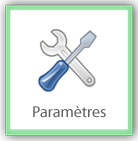
<style>
.page{position:relative;width:138px;height:141px;background:#ffffff}
.page>*{position:absolute;margin:0}
.t1{font:15.9px "MyriadPro-Regular";color:#615f5f}
</style>
<div class="page">
<p class="t1" style="left:33px;top:106px;width:73px;height:12px">Paramètres</p>
</div>
